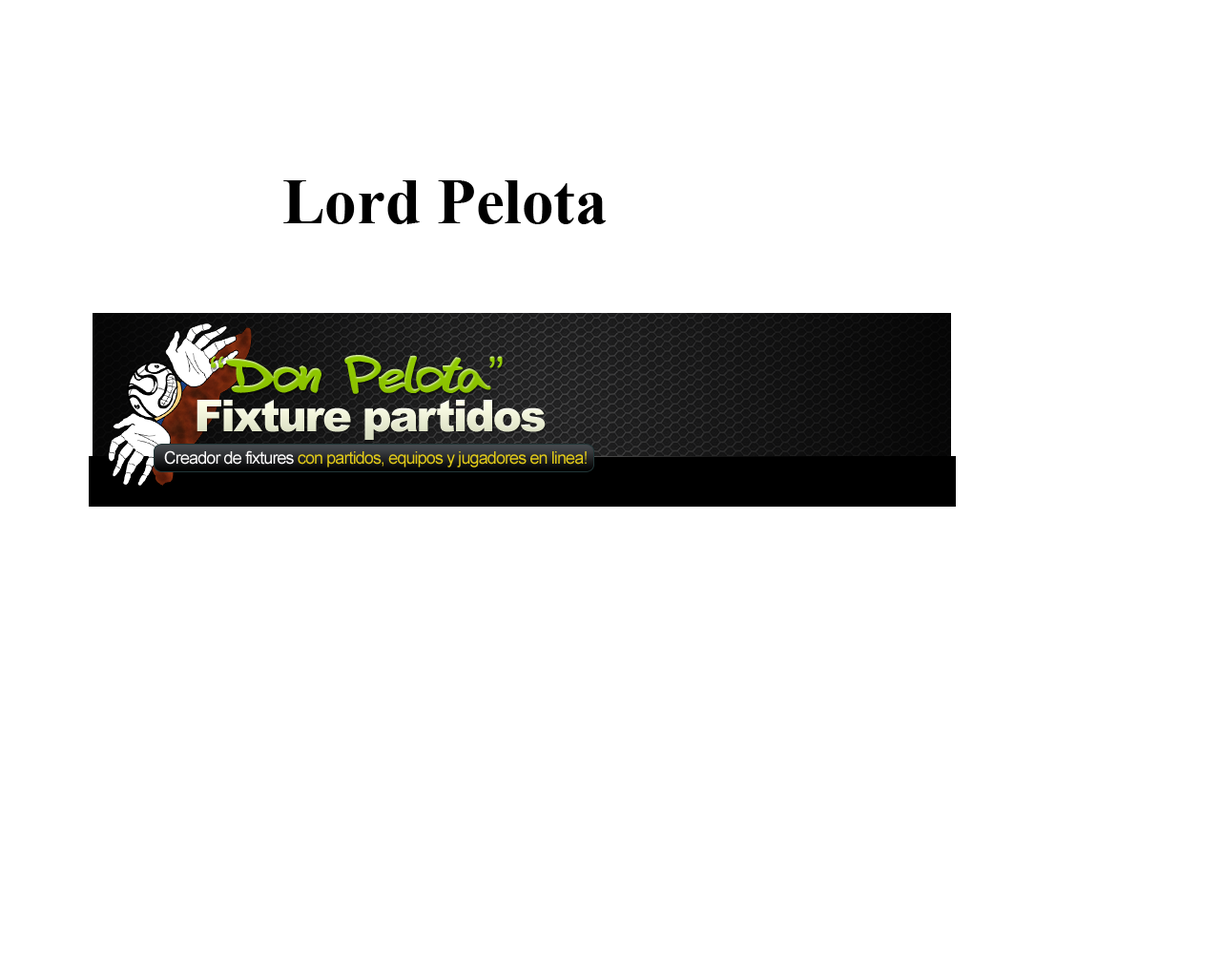
<style>
.page{position:relative;width:1221px;height:977px;background:#ffffff}
.page>*{position:absolute;margin:0}
.t1{font:63.9px "TimesNewRomanPS-BoldMT";color:#000000}
.t2{font:50.6px "FAFERS-font";color:#8ec600}
.t3{font:43.9px "Arial-Black";letter-spacing:-0.05em;color:#edefd7}
.t4{font:17.2px "ArialMT";letter-spacing:-0.05em;color:#e0c918}
.t5{font:17.2px "ArialMT";letter-spacing:-0.05em;color:#fdfcfc}
</style>
<div class="page">
<p class="t1" style="left:283px;top:180px;width:324px;height:44px">Lord Pelota</p>
<p class="t2" style="left:211px;top:355px;width:292px;height:39px">“Don Pelota”</p>
<p class="t3" style="left:196px;top:400px;width:350px;height:40px">Fixture partidos</p>
<p class="t4" style="left:164px;top:450px;width:423px;height:17px"><span class="t5">Creador de fixtures </span>con partidos, equipos y jugadores en linea!</p>
</div>
